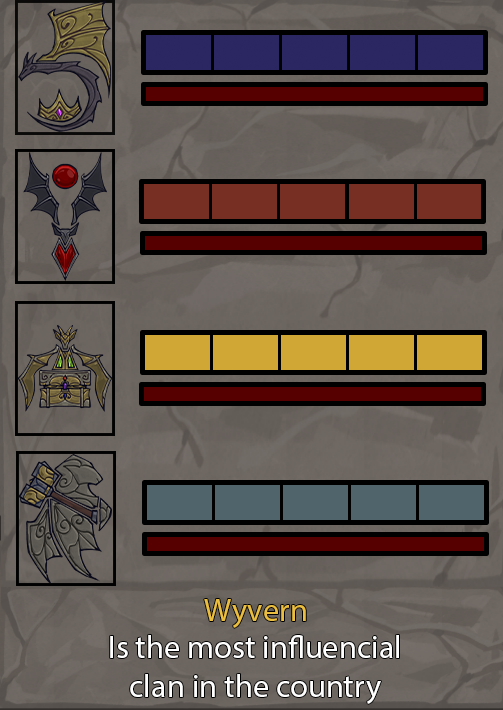
<style>
.page{position:relative;width:503px;height:710px}
.page>*{position:absolute;margin:0}
.t1{font:32.4px "MyriadPro-Regular";color:#ebbe40}
.t2{font:32.4px "MyriadPro-Regular";color:#ffffff}
</style>
<div class="page">
<p class="t1" style="left:204px;top:599px;width:102px;height:29px">Wyvern</p>
<p class="t2" style="left:110px;top:635px;width:289px;height:69px;text-align:center">Is the most influencial<br>clan in the country</p>
</div>
